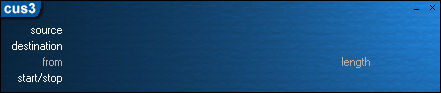
<style>
.page{position:relative;width:441px;height:93px}
.page>*{position:absolute;margin:0}
.t1{font:14px "Arial-BoldMT";color:#ffffff}
.t2{font:8px "MS Sans Serif";color:#ffffff}
.t3{font:8px "MS Sans Serif";color:#b4b4b4}
</style>
<div class="page">
<p class="t1" style="left:4px;top:3px;width:32px;height:11px">cus3</p>
<p class="t2" style="left:31px;top:28px;width:31px;height:6px">source</p>
<p class="t2" style="left:12px;top:41px;width:50px;height:9px">destination</p>
<p class="t3" style="left:43px;top:57px;width:19px;height:9px">from</p>
<p class="t3" style="left:342px;top:57px;width:28px;height:11px">length</p>
<p class="t2" style="left:18px;top:73px;width:44px;height:11px">start/stop</p>
</div>
